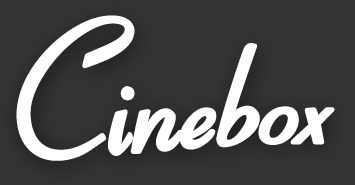
<style>
.page{position:relative;width:355px;height:185px;background:#333333}
.page>*{position:absolute;margin:0}
.t1{font:137.2px "Aspire-DemiBold";letter-spacing:-0.025em;color:#ffffff;scale:1.32 1}
</style>
<div class="page">
<p class="t1" style="left:18px;top:17px;width:315px;height:142px">Cinebox</p>
</div>
